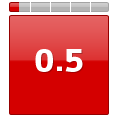
<style>
.page{position:relative;width:117px;height:117px;background:#d40000}
.page>*{position:absolute;margin:0}
.t1{font:36px "Colaborate-Bold";color:#ffffff;text-transform:uppercase}
</style>
<div class="page">
<p class="t1" style="left:35px;top:49px;width:48px;height:23px">0.5</p>
</div>
